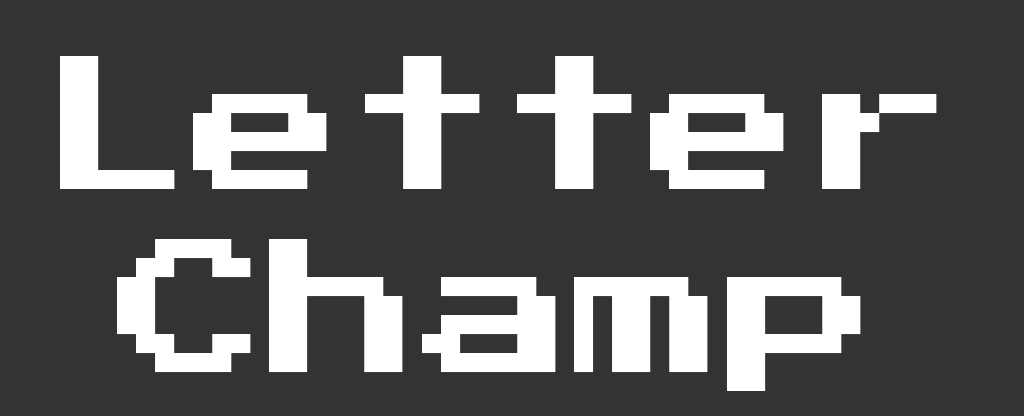
<style>
.page{position:relative;width:1024px;height:416px;background:#333333}
.page>*{position:absolute;margin:0}
.t1{font:152.4px "PressStart2P-Regular";color:#ffffff}
</style>
<div class="page">
<p class="t1" style="left:60px;top:56px;width:877px;height:335px;text-align:center">Letter Champ</p>
</div>
